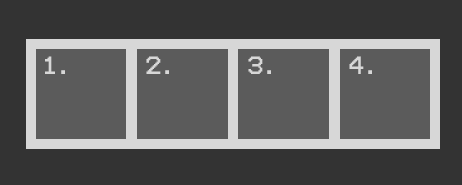
<style>
.page{position:relative;width:462px;height:185px;background:#333333}
.page>*{position:absolute;margin:0}
.t1{font:20px "Terminal";color:#d7d7d7}
</style>
<div class="page">
<p class="t1" style="left:45px;top:56px;width:20px;height:18px">1.</p>
<p class="t1" style="left:146px;top:56px;width:23px;height:18px">2.</p>
<p class="t1" style="left:248px;top:56px;width:23px;height:18px">3.</p>
<p class="t1" style="left:349px;top:56px;width:23px;height:18px">4.</p>
</div>
